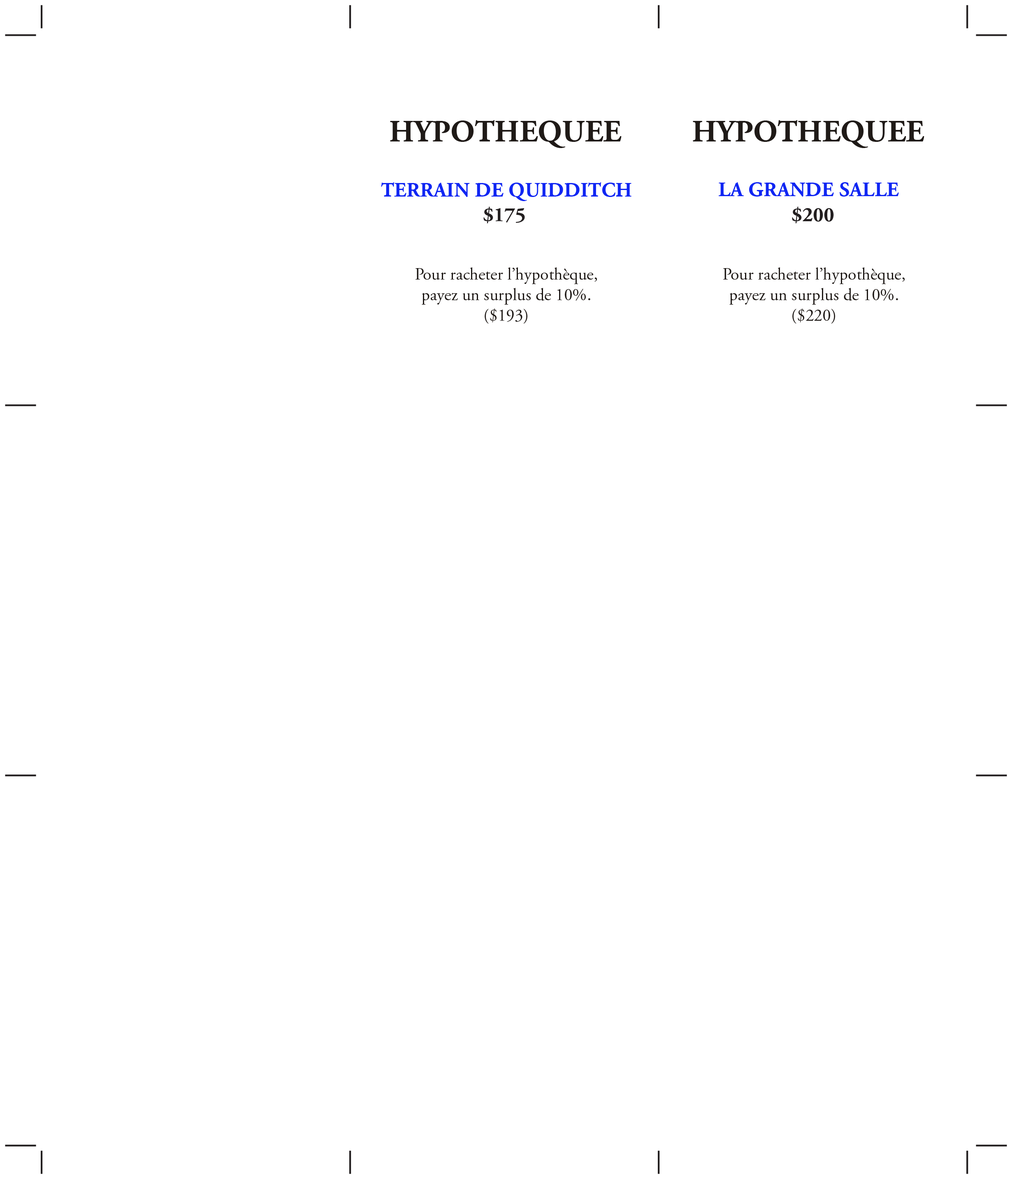
<style>
.page{position:relative;width:1012px;height:1179px;background:#ffffff}
.page>*{position:absolute;margin:0}
.t1{font:30.8px "AGaramond-Bold";color:#1f1a17}
.t2{font:4.9px "AGaramond-Bold";color:#1026f3}
.t3{font:17.1px "AGaramond-Regular";color:#1f1a17}
</style>
<div class="page">
<p class="t1" style="left:390px;top:120px;width:231px;height:28px">HYPOTHEQUEE</p>
<p class="t1" style="left:692px;top:120px;width:232px;height:28px">HYPOTHEQUEE</p>
<p class="t2" style="left:381px;top:182px;width:250px;height:19px;text-align:center">TERRAIN DE QUIDDITCH</p>
<p class="t2" style="left:718px;top:182px;width:180px;height:15px;text-align:center">LA GRANDE SALLE</p>
<p class="t3" style="left:415px;top:267px;width:182px;height:57px;text-align:center">Pour racheter l’hypothèque,<br>payez un surplus de 10%.<br>($193)</p>
<p class="t3" style="left:723px;top:267px;width:181px;height:57px;text-align:center">Pour racheter l’hypothèque,<br>payez un surplus de 10%.<br>($220)</p>
</div>
